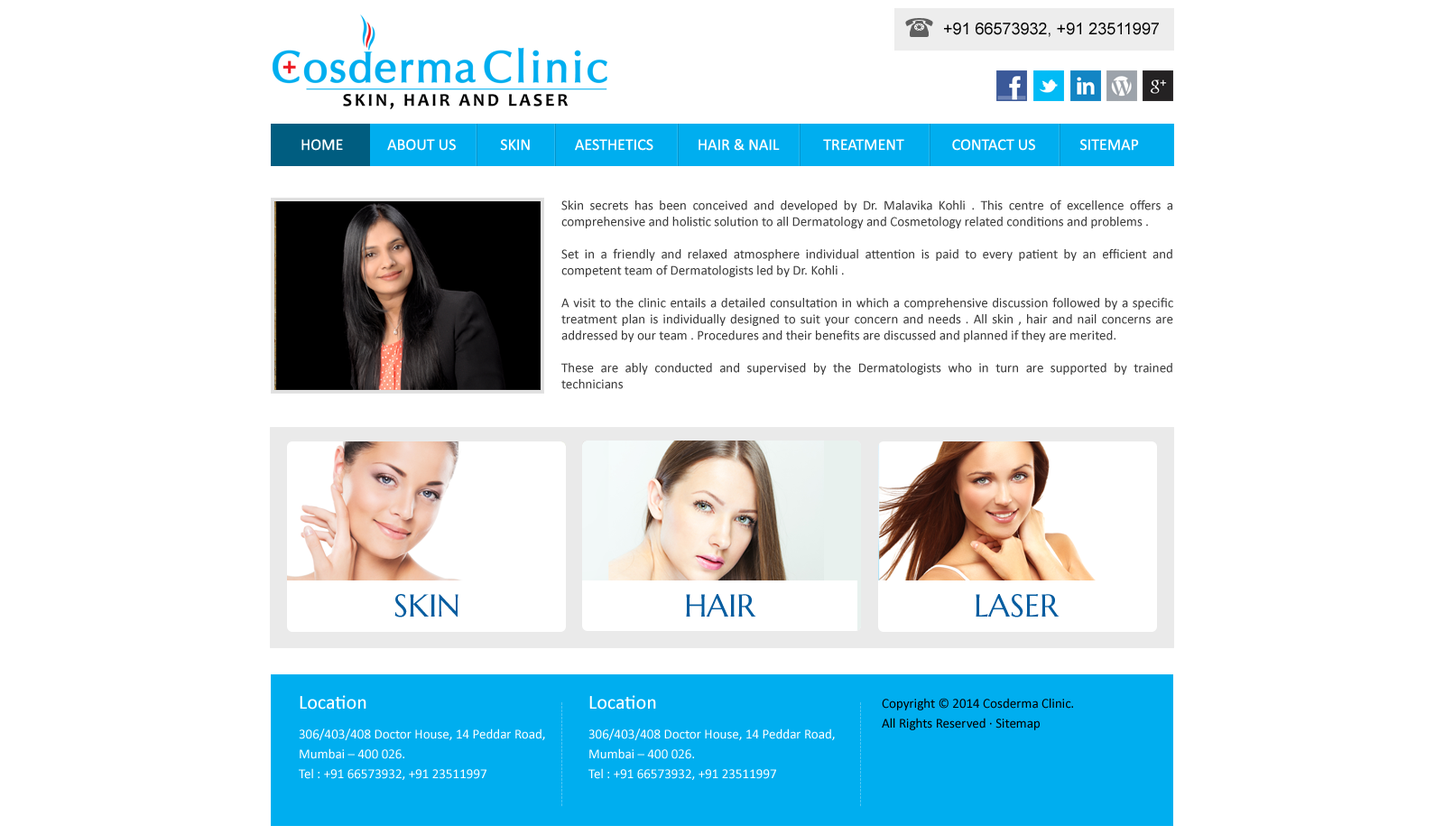
<style>
.page{position:relative;width:1444px;height:826px;background:#ffffff}
.page>*{position:absolute;margin:0}
.t1{font:16.2px "ArialMT";color:#000000}
.t2{font:16.2px "Calibri";color:#ffffff;text-transform:uppercase}
.t3{font:13.5px "Calibri";color:#3b3b3b}
.t4{font:31.6px "MarcellusSC-Regular";color:#065da0;text-transform:uppercase}
.t5{font:31.6px "MarcellusSC-Regular";color:#065da0}
.t6{font:19.9px "Calibri";color:#ffffff}
.t7{font:13.5px/19.9px "Calibri";color:#000000}
.t8{font:11.7px "ArialMT";color:#4dc6f4}
.t9{font:13.5px/19.9px "Calibri";color:#ffffff}
</style>
<div class="page">
<p class="t1" style="left:944px;top:23px;width:215px;height:14px">+91 66573932, +91 23511997</p>
<p class="t2" style="left:301px;top:139px;width:838px;height:12px">Home            About Us            Skin            Aesthetics            Hair &amp; Nail            Treatment             Contact us            Sitemap</p>
<p class="t3" style="left:561px;top:199px;width:612px;height:190px;text-align:justify">Skin secrets has been conceived and developed by Dr. Malavika Kohli . This centre of excellence offers a comprehensive and holistic solution to all Dermatology and Cosmetology related conditions and problems .<br><br>Set in a friendly and relaxed atmosphere individual attention is paid to every patient by an efficient and competent team of Dermatologists led by Dr. Kohli .<br><br>A visit to the clinic entails a detailed consultation in which a comprehensive discussion followed by a specific treatment plan is individually designed to suit your concern and needs . All skin , hair and nail concerns are addressed by our team . Procedures and their benefits are discussed and planned if they are merited. <br><br>These are ably conducted and supervised by the Dermatologists who in turn are supported by trained technicians<br><br>Our team also extends its expertise in helping you to make lifestyle changes that will directly benefit the aesthetic aspect of life.</p>
<p class="t4" style="left:394px;top:594px;width:64px;height:23px">Skin</p>
<p class="t4" style="left:686px;top:594px;width:70px;height:22px">Hair</p>
<p class="t5" style="left:976px;top:594px;width:84px;height:23px">LASER</p>
<p class="t6" style="left:300px;top:695px;width:66px;height:14px">Location</p>
<p class="t6" style="left:589px;top:695px;width:67px;height:14px">Location</p>
<p class="t7" style="left:882px;top:698px;width:191px;height:32px">Copyright © 2014 Cosderma Clinic. <br>All Rights Reserved · Sitemap</p>
<p class="t8" style="left:561px;top:702px;width:1px;height:104px;rotate:90deg">-----------------------------</p>
<p class="t8" style="left:860px;top:702px;width:1px;height:104px;rotate:90deg">-----------------------------</p>
<p class="t9" style="left:299px;top:728px;width:246px;height:52px">306/403/408 Doctor House, 14 Peddar Road, <br>Mumbai – 400 026.<br>Tel : +91 66573932, +91 23511997<br>Tele Fax: 23511997<br>Mobile:+91 9324795282<br>Email: malavikakohli@gmail.com</p>
<p class="t9" style="left:588px;top:728px;width:247px;height:52px">306/403/408 Doctor House, 14 Peddar Road, <br>Mumbai – 400 026.<br>Tel : +91 66573932, +91 23511997<br>Tele Fax: 23511997<br>Mobile:+91 9324795282<br>Email: malavikakohli@gmail.com</p>
</div>
